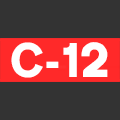
<style>
.page{position:relative;width:120px;height:120px;background:#333333}
.page>*{position:absolute;margin:0}
.t1{font:48px "Ccrige-Regular";color:#ffffff}
</style>
<div class="page">
<p class="t1" style="left:11px;top:42px;width:97px;height:36px">C-12</p>
</div>
